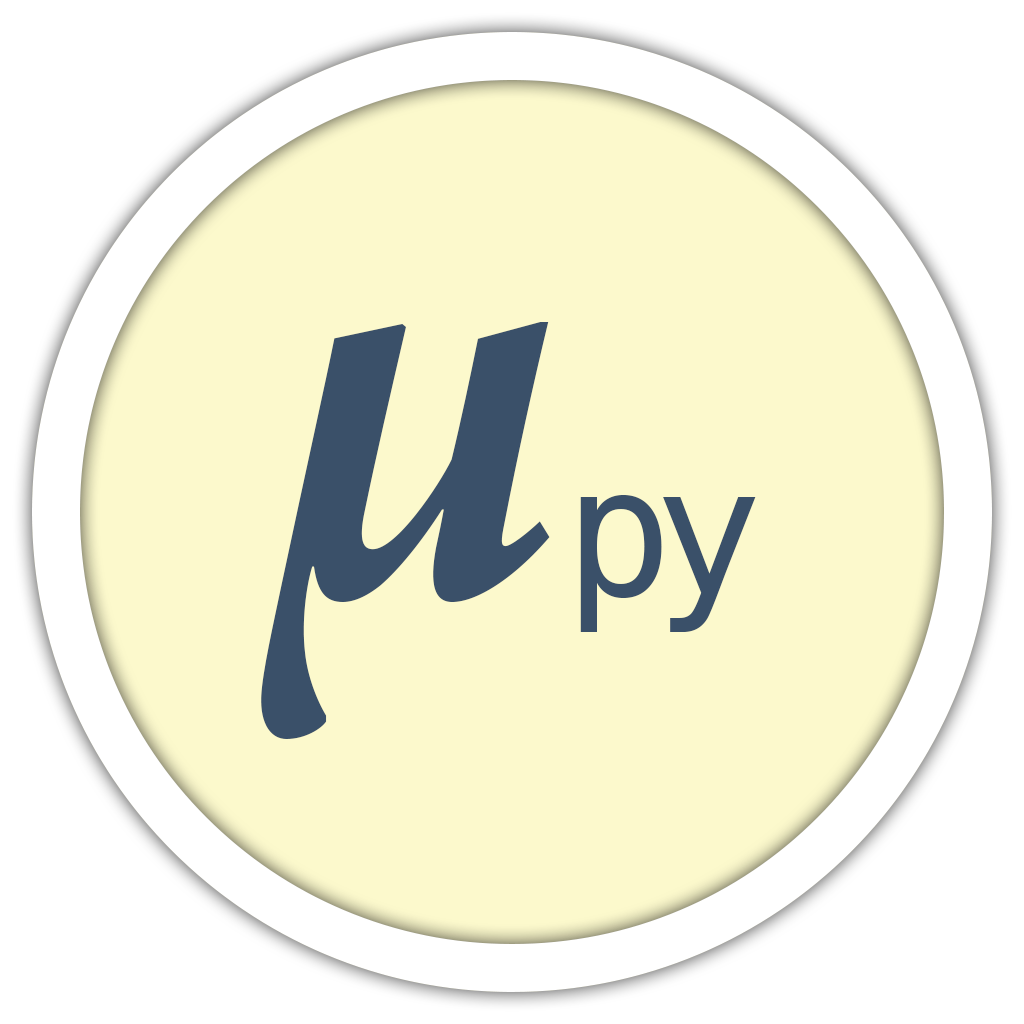
<style>
.page{position:relative;width:1024px;height:1024px;background:#fcf9cc}
.page>*{position:absolute;margin:0}
.t1{font:180px "Menlo-Regular";letter-spacing:-0.1em;color:#3a5069}
.t2{font:600px "MinionPro-BoldCnIt";color:#3a5069}
</style>
<div class="page">
<p class="t1" style="left:261px;top:322px;width:495px;height:417px"><span class="t2">μ</span>py</p>
</div>
